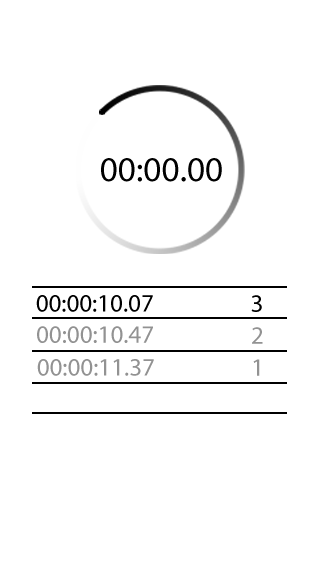
<style>
.page{position:relative;width:320px;height:568px;background:#ffffff}
.page>*{position:absolute;margin:0}
.t1{font:35.4px "MyriadPro-Regular";color:#000000}
.t2{font:25px "MyriadPro-Regular";color:#000000}
.t3{font:25px "MyriadPro-Regular";color:#929292}
</style>
<div class="page">
<p class="t1" style="left:101px;top:158px;width:121px;height:24px">00:00.00</p>
<p class="t2" style="left:36px;top:295px;width:117px;height:17px">00:00:10.07</p>
<p class="t2" style="left:251px;top:295px;width:11px;height:17px">3</p>
<p class="t3" style="left:37px;top:326px;width:116px;height:17px">00:00:10.47</p>
<p class="t3" style="left:252px;top:327px;width:11px;height:17px">2</p>
<p class="t3" style="left:37px;top:359px;width:117px;height:17px">00:00:11.37</p>
<p class="t3" style="left:253px;top:359px;width:7px;height:17px">1</p>
</div>
